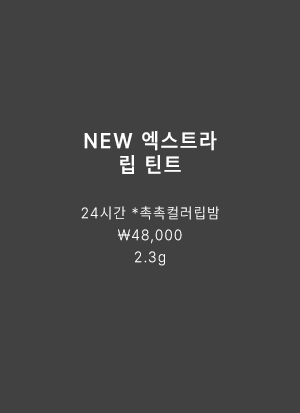
<style>
.page{position:relative;width:300px;height:413px;background:#414141}
.page>*{position:absolute;margin:0}
.t1{font:15.1px/22px "Pretendard-Light";letter-spacing:0.1em;color:#ffffff;scale:0.93 1}
.t2{font:21.6px "Pretendard-SemiBold";letter-spacing:0.1em;color:#ffffff;scale:0.93 1}
</style>
<div class="page">
<p class="t1" style="left:81px;top:131px;width:138px;height:135px;text-align:center"><span class="t2">NEW 엑스트라 <br>립 틴트<br><br></span>24시간 *촉촉컬러립밤<br>₩48,000<br>2.3g</p>
</div>
